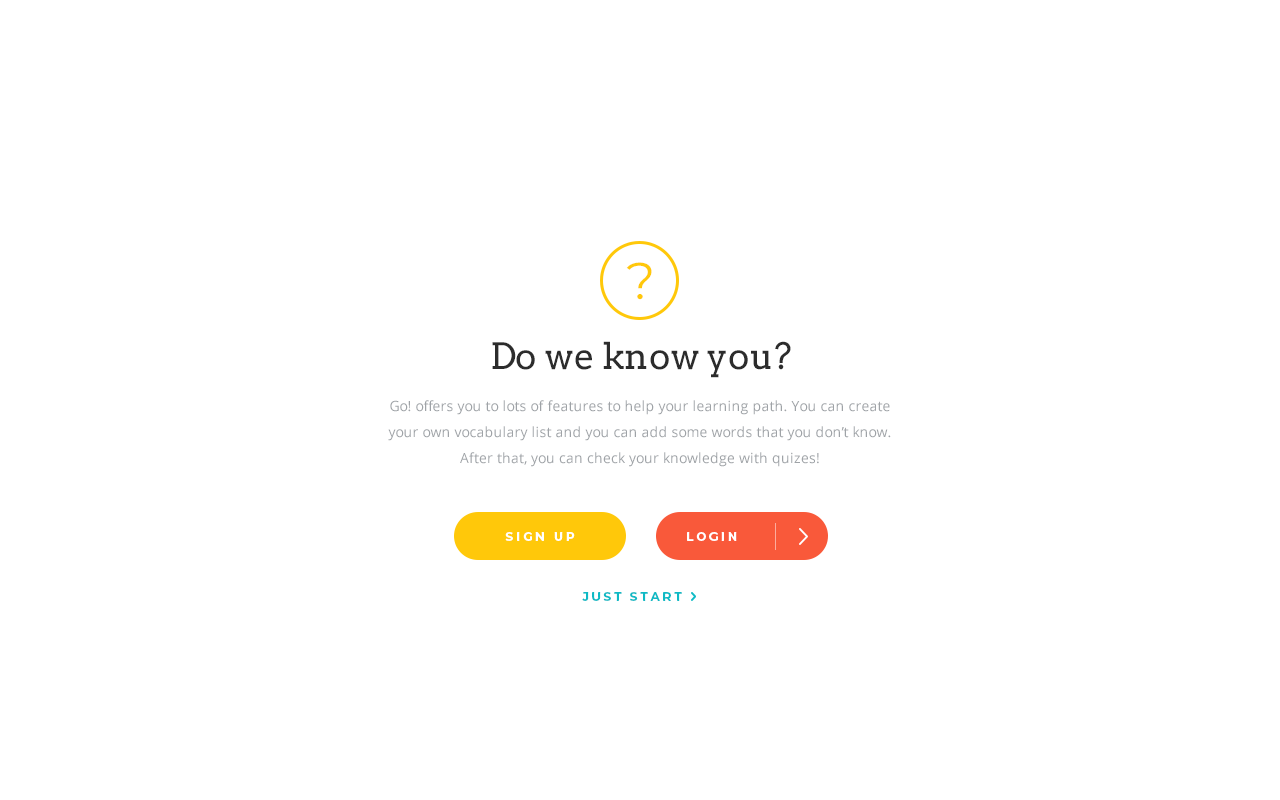
<style>
.page{position:relative;width:1280px;height:800px;background:#ffffff}
.page>*{position:absolute;margin:0}
.t1{font:51.9px "Montserrat-Regular";color:#ffc80a}
.t2{font:36px "Arvo";color:#2c2c2c}
.t3{font:14px/26px "OpenSans";color:#9fa3a7}
.t4{font:12px "Montserrat-Bold";letter-spacing:0.24em;color:#ffffff;text-transform:uppercase}
.t5{font:12px "Montserrat-Bold";letter-spacing:0.24em;color:#0ebac5;text-transform:uppercase}
</style>
<div class="page">
<p class="t1" style="left:626px;top:262px;width:26px;height:38px">?</p>
<p class="t2" style="left:492px;top:341px;width:299px;height:37px">Do we know you?</p>
<p class="t3" style="left:388px;top:400px;width:503px;height:67px;text-align:center">Go! offers you to lots of features to help your learning path. You can create your own vocabulary list and you can add some words that you don’t know. After that, you can check your knowledge with quizes!</p>
<p class="t4" style="left:505px;top:532px;width:70px;height:9px">SIGN UP</p>
<p class="t4" style="left:687px;top:532px;width:50px;height:9px">LOGIN</p>
<p class="t5" style="left:582px;top:592px;width:100px;height:9px">JUST START</p>
</div>
